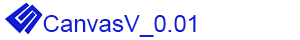
<style>
.page{position:relative;width:300px;height:40px;background:#ffffff}
.page>*{position:absolute;margin:0}
.t1{font:24px "ArialMT";color:#101ed4}
</style>
<div class="page">
<p class="t1" style="left:43px;top:15px;width:153px;height:22px">CanvasV_0.01</p>
</div>
